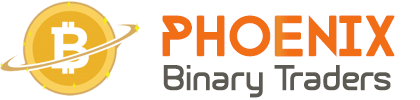
<style>
.page{position:relative;width:420px;height:100px;background:#ffffff}
.page>*{position:absolute;margin:0}
.t1{font:47.2px "FARRAY-Regular";letter-spacing:-0.01em;color:#f26e16}
.t2{font:36.6px "BrainWants";letter-spacing:-0.01em;color:#5d5a53}
</style>
<div class="page">
<p class="t1" style="left:162px;top:15px;width:233px;height:42px">PHOENIX</p>
<p class="t2" style="left:163px;top:65px;width:228px;height:33px">Binary Traders</p>
</div>
